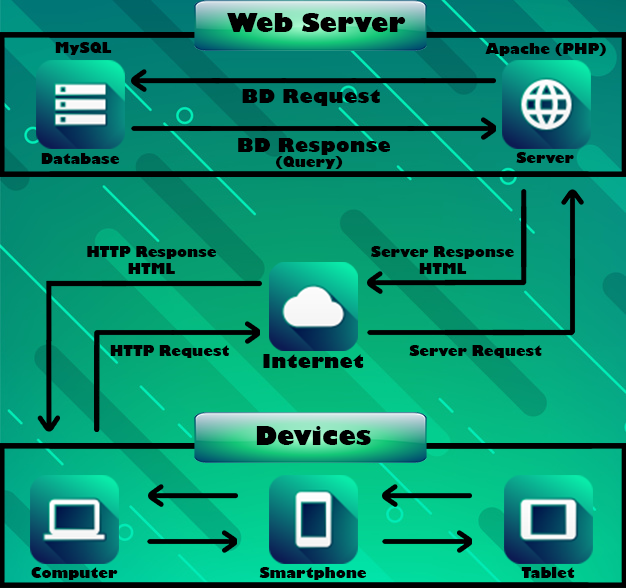
<style>
.page{position:relative;width:626px;height:588px}
.page>*{position:absolute;margin:0}
.t1{font:25px "GillSans-UltraBold";color:#010000}
.t2{font:13.9px "GillSans-UltraBold";color:#000000}
.t3{font:19.4px "GillSans-UltraBold";color:#000000}
.t4{font:25px "GillSans-UltraBold";color:#000000}
</style>
<div class="page">
<p class="t1" style="left:227px;top:13px;width:179px;height:19px">Web Server</p>
<p class="t2" style="left:55px;top:42px;width:57px;height:13px">MySQL</p>
<p class="t2" style="left:485px;top:43px;width:121px;height:13px">Apache (PHP)</p>
<p class="t3" style="left:242px;top:89px;width:138px;height:17px">BD Request</p>
<p class="t3" style="left:238px;top:138px;width:152px;height:17px">BD Response</p>
<p class="t2" style="left:41px;top:153px;width:78px;height:11px">Database</p>
<p class="t2" style="left:276px;top:156px;width:67px;height:13px">(Query)</p>
<p class="t2" style="left:516px;top:152px;width:58px;height:11px">Server</p>
<p class="t2" style="left:87px;top:246px;width:129px;height:28px;text-align:center">HTTP Response<br>HTML</p>
<p class="t2" style="left:371px;top:246px;width:143px;height:28px;text-align:center">Server Response<br>HTML</p>
<p class="t2" style="left:110px;top:345px;width:119px;height:13px">HTTP Request</p>
<p class="t2" style="left:409px;top:345px;width:133px;height:13px">Server Request</p>
<p class="t3" style="left:263px;top:354px;width:101px;height:14px">Internet</p>
<p class="t4" style="left:256px;top:426px;width:115px;height:19px">Devices</p>
<p class="t2" style="left:31px;top:567px;width:87px;height:13px">Computer</p>
<p class="t2" style="left:259px;top:567px;width:107px;height:13px">Smartphone</p>
<p class="t2" style="left:521px;top:567px;width:54px;height:11px">Tablet</p>
</div>
